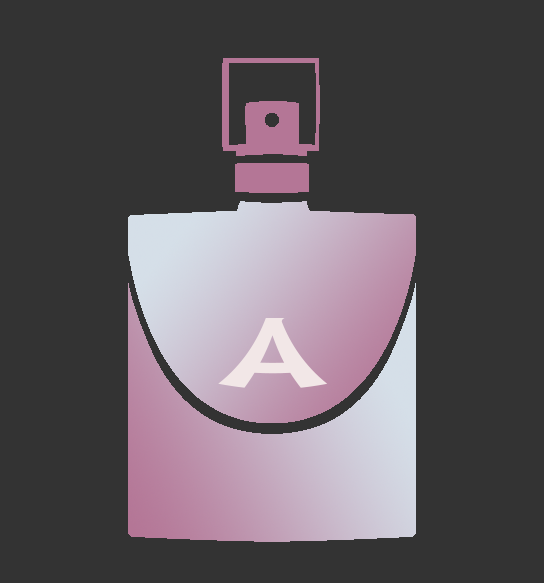
<style>
.page{position:relative;width:544px;height:583px;background:#333333}
.page>*{position:absolute;margin:0}
.t1{font:100px "TTHayanbaramR";color:#f2e7e7}
</style>
<div class="page">
<p class="t1" style="left:218px;top:318px;width:110px;height:70px">A</p>
</div>
